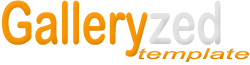
<style>
.page{position:relative;width:250px;height:65px;background:#ffffff}
.page>*{position:absolute;margin:0}
.t1{font:59.6px "ArialRoundedMTBold";color:#f69400;scale:0.72 1}
.t2{font:59.6px "ArialRoundedMTBold";color:#e1e1e1;scale:0.72 1}
.t3{font:14.9px "Arial-ItalicMT";color:#f69400;scale:1.98 1}
</style>
<div class="page">
<p class="t1" style="left:2px;top:0px;width:219px;height:57px">Gallery<span class="t2">zed</span></p>
<p class="t3" style="left:138px;top:48px;width:111px;height:14px">template</p>
</div>
